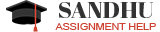
<style>
.page{position:relative;width:160px;height:32px;background:#ffffff}
.page>*{position:absolute;margin:0}
.t1{font:10px "ArialMT";color:#cc4331;scale:1.06 1}
.t2{font:22px "AbrilFatface-Regular";color:#333333;scale:1.06 1}
</style>
<div class="page">
<p class="t1" style="left:55px;top:2px;width:101px;height:28px;text-align:center"><span class="t2">SANDHU<br></span>ASSIGNMENT HELP</p>
</div>
